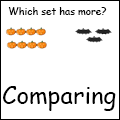
<style>
.page{position:relative;width:120px;height:120px;background:#ffffff}
.page>*{position:absolute;margin:0}
.t1{font:10px "ComicSansMS";color:#000000}
.t2{font:24px "ComicSansMS";color:#000000}
</style>
<div class="page">
<p class="t1" style="left:8px;top:7px;width:99px;height:8px">Which set has more?</p>
<p class="t2" style="left:3px;top:86px;width:113px;height:25px">Comparing</p>
</div>
